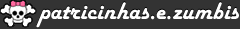
<style>
.page{position:relative;width:240px;height:29px;background:#333333}
.page>*{position:absolute;margin:0}
.t1{font:25px "HarlowSolid";letter-spacing:0.005em;color:#ffffff}
</style>
<div class="page">
<p class="t1" style="left:36px;top:2px;width:203px;height:26px">patricinhas.e.zumbis</p>
</div>
